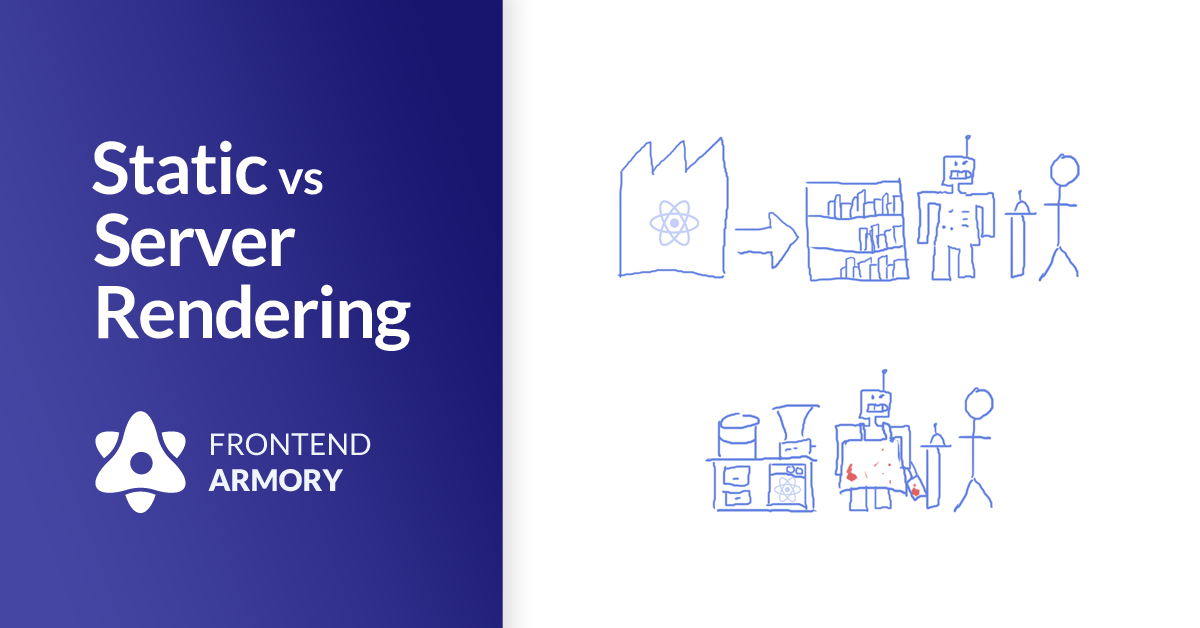
<style>
.page{position:relative;width:1200px;height:628px;background:#ffffff}
.page>*{position:absolute;margin:0}
.t1{font:72px/72px "Lato-Bold";letter-spacing:-0.025em;color:#ffffff}
.t2{font:48px/72px "Lato-Bold";letter-spacing:-0.025em;color:#ffffff}
.t3{font:30px "Lato-Regular";color:#f0f4fb}
.t4{font:30px "Lato-Black";color:#f0f4fb}
</style>
<div class="page">
<p class="t1" style="left:92px;top:140px;width:319px;height:211px">Static <span class="t2">vs<br></span>Server<br>Rendering</p>
<p class="t3" style="left:208px;top:433px;width:163px;height:59px">FRONTEND<br><span class="t4">ARMORY</span></p>
</div>
